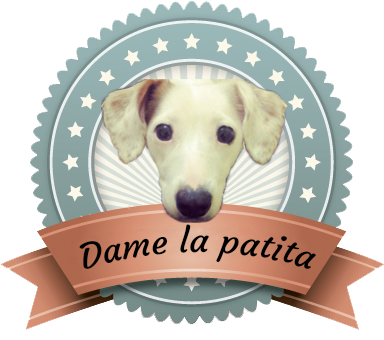
<style>
.page{position:relative;width:384px;height:340px;background:#ffffff}
.page>*{position:absolute;margin:0}
.t1{font:34px "Courgette-Regular";color:#000000}
</style>
<div class="page">
<p class="t1" style="left:79px;top:224px;width:237px;height:45px">Dame la patita</p>
</div>
